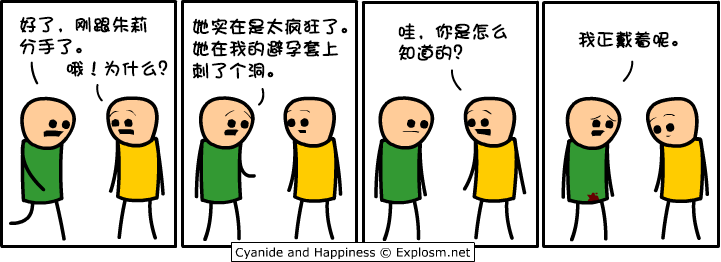
<style>
.page{position:relative;width:721px;height:262px;background:#ffffff}
.page>*{position:absolute;margin:0}
.t1{font:18px/22px "DFShaoNvW5";color:#000000;font-weight:bold}
.t2{font:18px/21px "DFShaoNvW5";color:#000000;font-weight:bold}
.t3{font:18px "DFShaoNvW5";color:#000000;font-weight:bold}
</style>
<div class="page">
<p class="t1" style="left:19px;top:16px;width:128px;height:39px">好了，刚跟朱莉<br>分手了。</p>
<p class="t1" style="left:192px;top:18px;width:156px;height:61px">她实在是太疯狂了。<br>她在我的避孕套上<br>刺了个洞。</p>
<p class="t2" style="left:398px;top:23px;width:109px;height:38px">哇，你是怎么<br>知道的？</p>
<p class="t3" style="left:578px;top:31px;width:100px;height:18px">我正戴着呢。</p>
<p class="t3" style="left:66px;top:60px;width:102px;height:17px">哦！为什么？</p>
</div>
